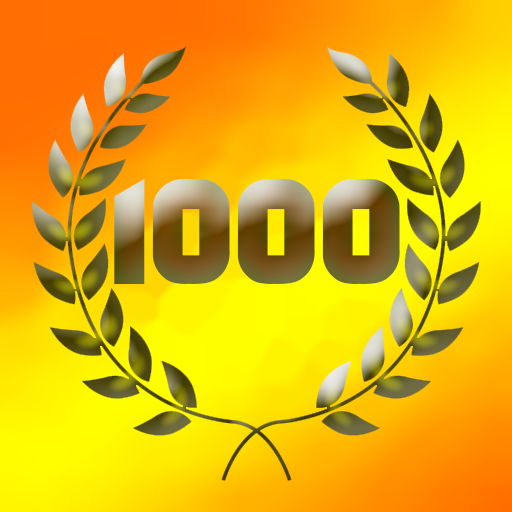
<style>
.page{position:relative;width:512px;height:512px}
.page>*{position:absolute;margin:0}
.t1{font:150px "Minotaur-Phatte"}
</style>
<div class="page">
<p class="t1" style="left:114px;top:179px;width:286px;height:105px">1000</p>
</div>
